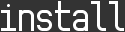
<style>
.page{position:relative;width:125px;height:32px;background:#333333}
.page>*{position:absolute;margin:0}
.t1{font:48px "Monkey";color:#ffffff}
</style>
<div class="page">
<p class="t1" style="left:1px;top:1px;width:123px;height:30px">install</p>
</div>
